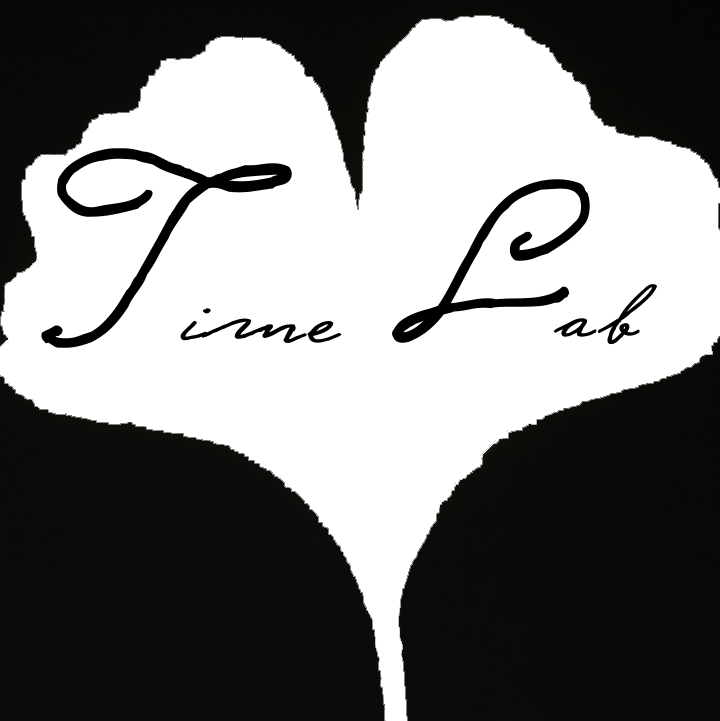
<style>
.page{position:relative;width:720px;height:721px;background:#ffffff}
.page>*{position:absolute;margin:0}
.t1{font:200px "Sudestada";color:#000000;font-weight:bold}
.t2{font:82.6px "Sudestada";color:#000000;font-weight:bold;scale:1.38 1}
.t3{font:90.2px "Sudestada";color:#000000;font-weight:bold;scale:1.67 1}
</style>
<div class="page">
<p class="t1" style="left:41px;top:148px;width:251px;height:200px">T</p>
<p class="t1" style="left:392px;top:179px;width:198px;height:164px">L</p>
<p class="t2" style="left:553px;top:284px;width:104px;height:61px">ab</p>
<p class="t3" style="left:180px;top:308px;width:162px;height:35px">ime</p>
</div>
